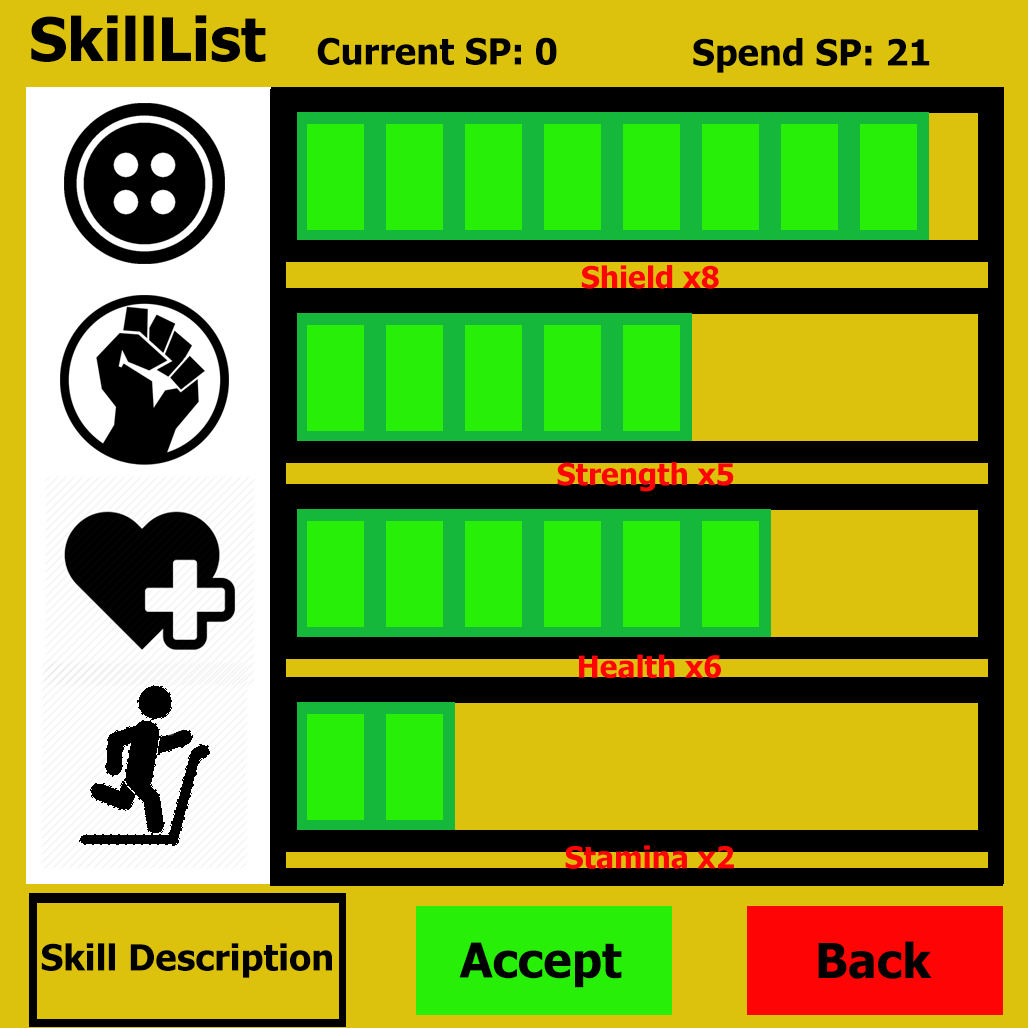
<style>
.page{position:relative;width:1028px;height:1028px;background:#dcc10d}
.page>*{position:absolute;margin:0}
.t1{font:60px "Tahoma-Bold";color:#000000}
.t2{font:36px "Tahoma-Bold";color:#000000}
.t3{font:30px "Tahoma-Bold";color:#ff0404}
</style>
<div class="page">
<p class="t1" style="left:31px;top:15px;width:235px;height:47px">SkillList</p>
<p class="t2" style="left:317px;top:37px;width:240px;height:28px">Current SP: 0</p>
<p class="t2" style="left:693px;top:38px;width:237px;height:35px">Spend SP: 21</p>
<p class="t3" style="left:581px;top:265px;width:138px;height:24px">Shield x8</p>
<p class="t3" style="left:557px;top:462px;width:177px;height:30px">Strength x5</p>
<p class="t3" style="left:579px;top:654px;width:142px;height:24px">Health x6</p>
<p class="t3" style="left:565px;top:845px;width:169px;height:24px">Stamina x2</p>
<p class="t2" style="left:41px;top:943px;width:291px;height:35px">Skill Description</p>
</div>
